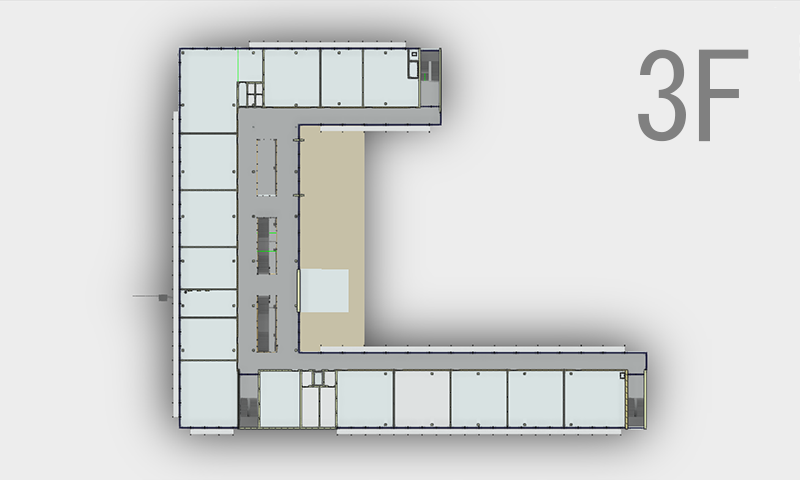
<style>
.page{position:relative;width:800px;height:480px;background:#ededed}
.page>*{position:absolute;margin:0}
.t1{font:120px "MS-Gothic";color:#808080}
</style>
<div class="page">
<p class="t1" style="left:638px;top:49px;width:111px;height:93px">2F</p>
<p class="t1" style="left:638px;top:49px;width:111px;height:93px">3F</p>
<p class="t1" style="left:644px;top:49px;width:105px;height:93px">1F</p>
</div>
